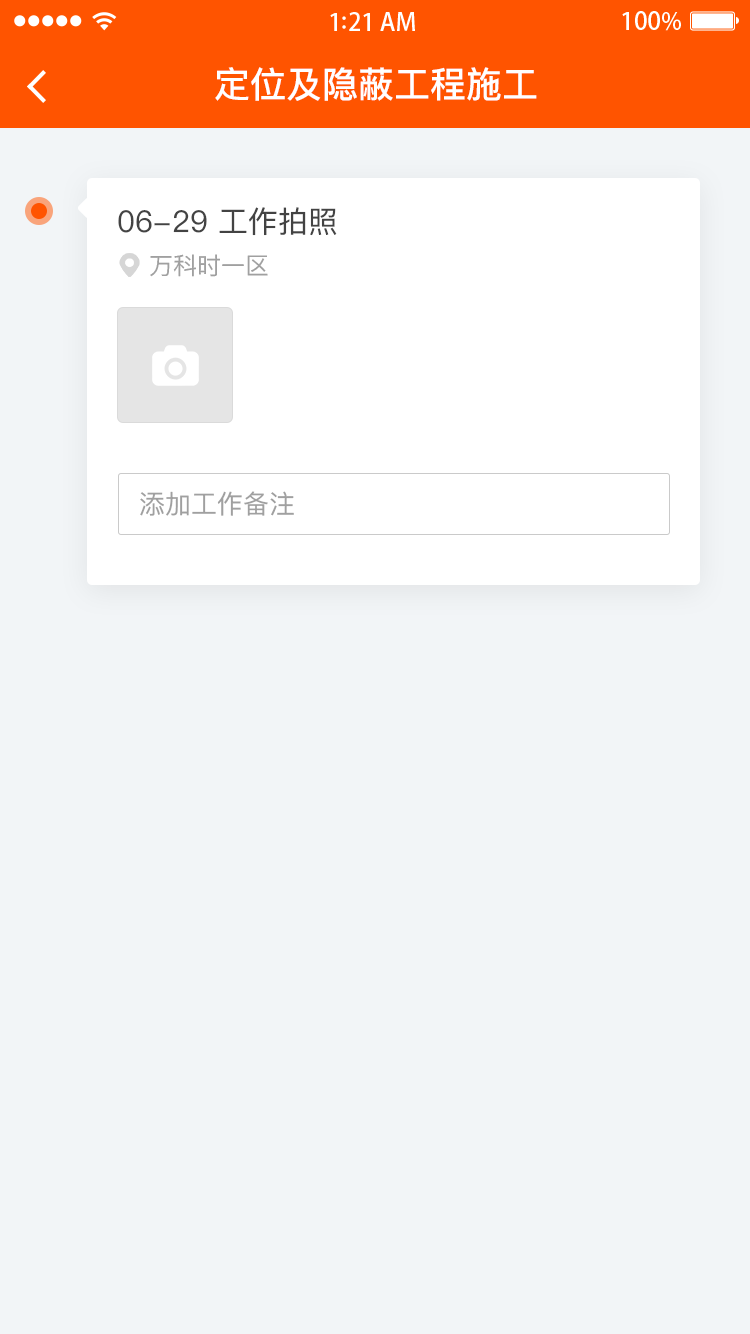
<style>
.page{position:relative;width:750px;height:1334px;background:#f2f5f7}
.page>*{position:absolute;margin:0}
.t1{font:36px "PingFangSC-Medium";color:#ffffff}
.t2{font:30px "PingFangSC-Regular";color:#434343}
.t3{font:24px "PingFangSC-Regular";color:#a0a0a0}
.t4{font:26px "PingFangSC-Regular";color:#a0a0a0}
</style>
<div class="page">
<p class="t1" style="left:215px;top:67px;width:322px;height:34px">定位及隐蔽工程施工</p>
<p class="t2" style="left:118px;top:207px;width:219px;height:29px">06-29 工作拍照</p>
<p class="t3" style="left:150px;top:254px;width:118px;height:23px">万科时一区</p>
<p class="t4" style="left:140px;top:491px;width:154px;height:25px">添加工作备注</p>
</div>
